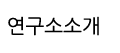
<style>
.page{position:relative;width:120px;height:53px;background:#ffffff}
.page>*{position:absolute;margin:0}
.t1{font:19.9px "NanumGothic";color:#000000}
</style>
<div class="page">
<p class="t1" style="left:8px;top:16px;width:91px;height:20px">연구소소개</p>
</div>
